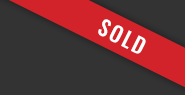
<style>
.page{position:relative;width:185px;height:95px;background:#333333}
.page>*{position:absolute;margin:0}
.t1{font:21.3px "Oswald-Medium";letter-spacing:0.1em;color:#ffffff}
</style>
<div class="page">
<p class="t1" style="left:98px;top:19px;width:48px;height:35px;rotate:26deg">SOLD</p>
</div>
